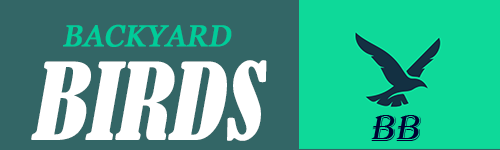
<style>
.page{position:relative;width:500px;height:150px;background:#336666}
.page>*{position:absolute;margin:0}
.t1{font:30px "Georgia";color:#00cc99;font-weight:bold;font-style:italic}
.t2{font:99.6px "BernardMT-Condensed";color:#ffffff;font-style:italic}
.t3{font:29.9px "Broadway";color:#ffffff;font-style:italic}
</style>
<div class="page">
<p class="t1" style="left:63px;top:24px;width:169px;height:23px">BACKYARD</p>
<p class="t2" style="left:31px;top:60px;width:236px;height:81px"><span class="t3"><br></span>BIRDS</p>
</div>
